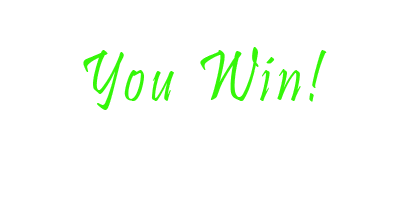
<style>
.page{position:relative;width:400px;height:200px;background:#ffffff}
.page>*{position:absolute;margin:0}
.t1{font:75px "Pristina-Regular";letter-spacing:0.09em;color:#35f609;scale:0.8 1}
</style>
<div class="page">
<p class="t1" style="left:83px;top:47px;width:244px;height:63px">You Win!</p>
</div>
